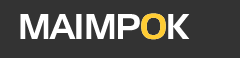
<style>
.page{position:relative;width:240px;height:58px;background:#333333}
.page>*{position:absolute;margin:0}
.t1{font:36px "Jobber";color:#ffffff}
.t2{font:36px "Jobber";color:#ffcc33}
</style>
<div class="page">
<p class="t1" style="left:20px;top:13px;width:170px;height:27px">MAIMPOK</p>
<p class="t2" style="left:141px;top:13px;width:25px;height:27px">O</p>
</div>
